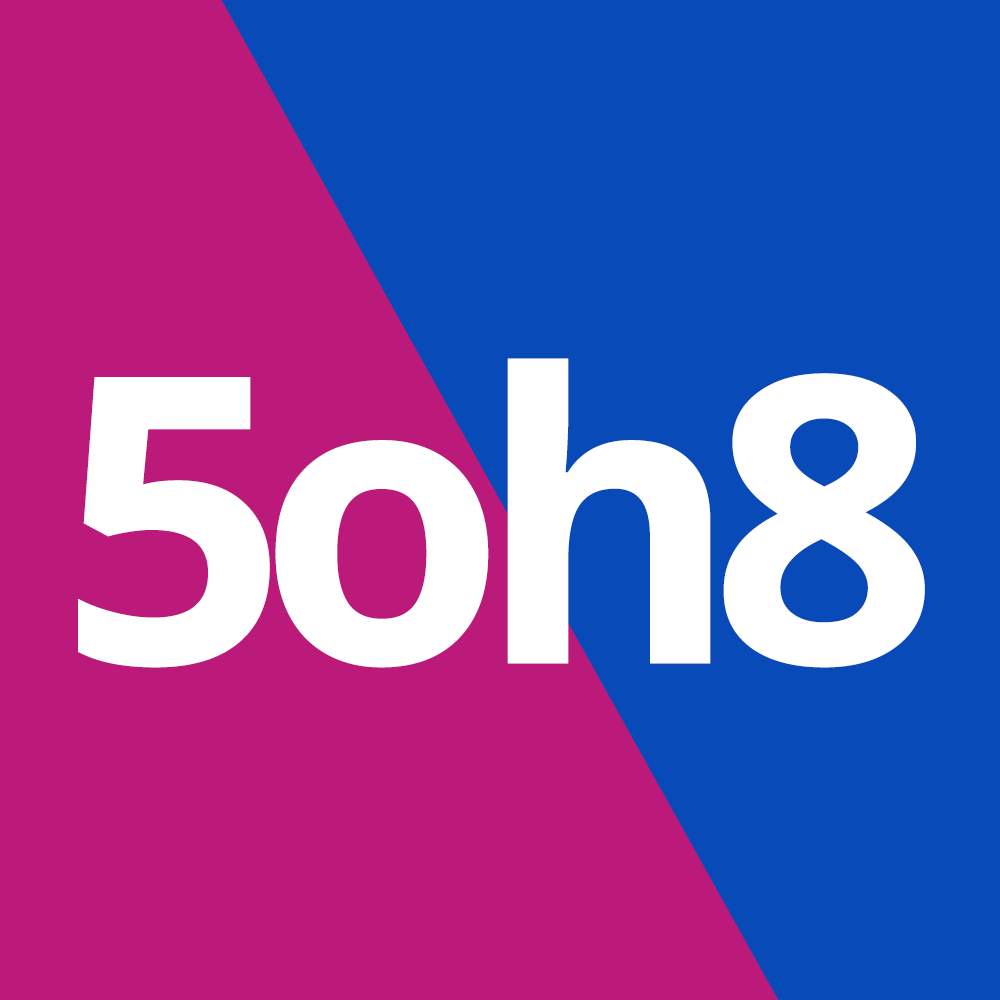
<style>
.page{position:relative;width:1000px;height:1000px;background:#084bb8}
.page>*{position:absolute;margin:0}
.t1{font:400px "OpenSans-Bold";letter-spacing:-0.1em;color:#ffffff;font-weight:bold}
</style>
<div class="page">
<p class="t1" style="left:78px;top:358px;width:847px;height:310px">5oh8</p>
</div>
